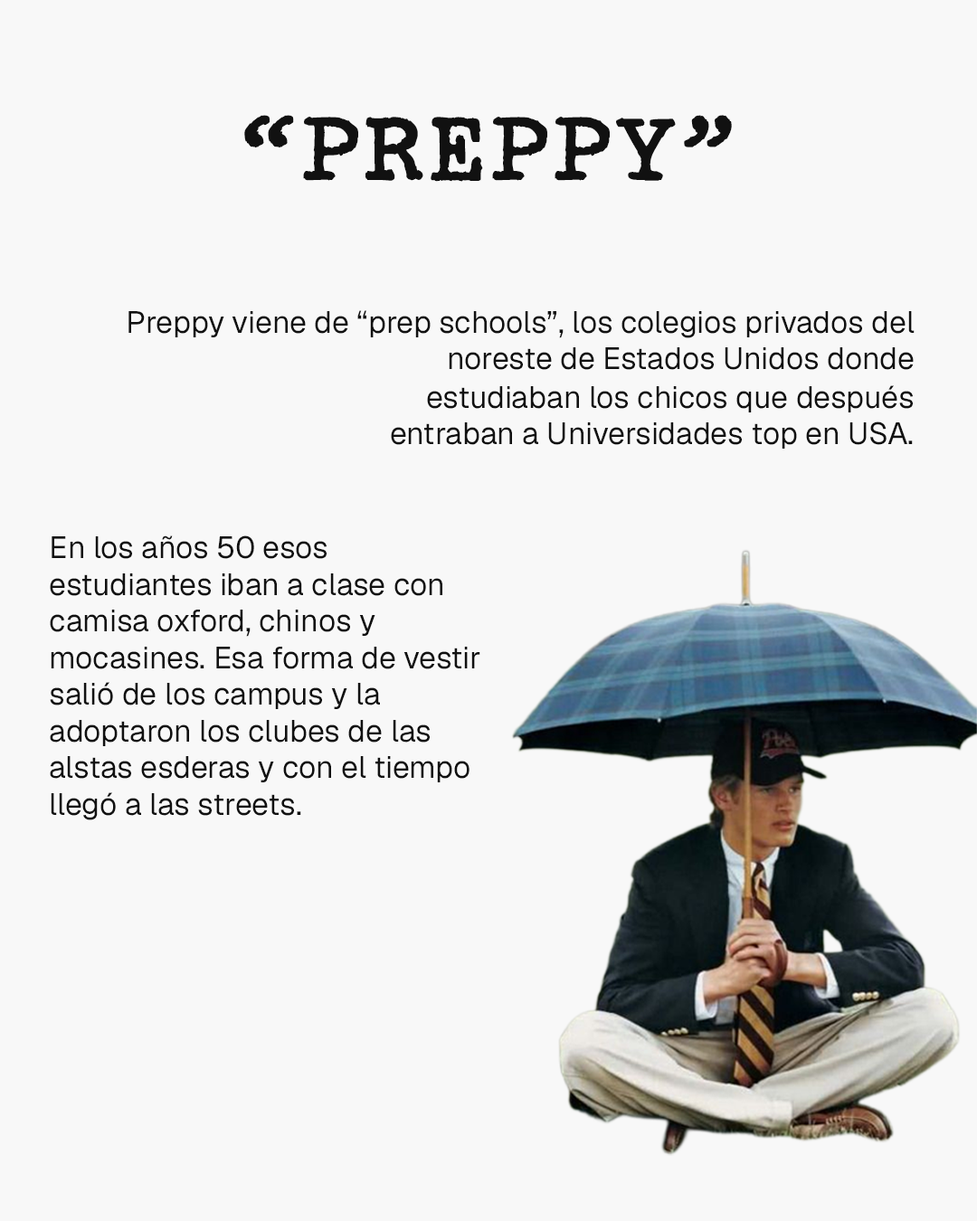
<style>
.page{position:relative;width:977px;height:1221px;background:#f8f8f8}
.page>*{position:absolute;margin:0}
.t1{font:107.3px "SecretServiceTypewriterRR-Regular";color:#111111}
.t2{font:30.5px "Geist-Regular";color:#111111}
</style>
<div class="page">
<p class="t1" style="left:244px;top:115px;width:488px;height:67px">“PREPPY”</p>
<p class="t2" style="left:128px;top:310px;width:786px;height:60px;text-align:right">Preppy viene de “prep schools”, los colegios privados del noreste de Estados Unidos donde</p>
<p class="t2" style="left:391px;top:385px;width:521px;height:64px;text-align:right">estudiaban los chicos que después entraban a Universidades top en USA.</p>
<p class="t2" style="left:50px;top:535px;width:430px;height:285px">En los años 50 esos estudiantes iban a clase con camisa oxford, chinos y mocasines. Esa forma de vestir salió de los campus y la adoptaron los clubes de las alstas esderas y con el tiempo llegó a las streets.</p>
</div>
